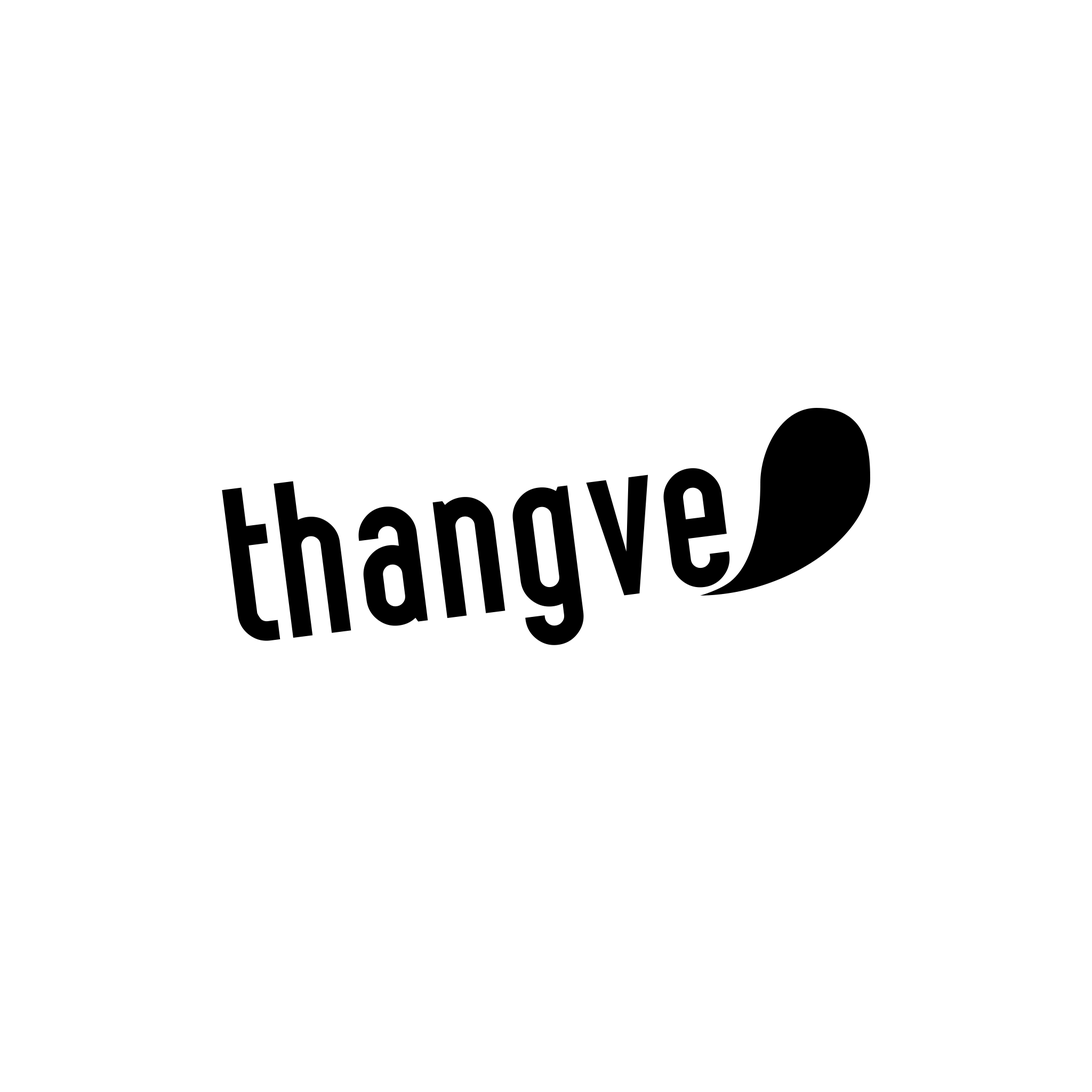
<style>
.page{position:relative;width:1092px;height:1092px;background:#ffffff}
.page>*{position:absolute;margin:0}
.t1{font:194.1px "UTM-Pacific-Standard";color:#000000}
</style>
<div class="page">
<p class="t1" style="left:222px;top:468px;width:508px;height:177px;rotate:-7deg">thangve</p>
</div>
